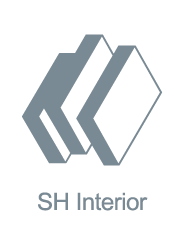
<style>
.page{position:relative;width:188px;height:250px;background:#ffffff}
.page>*{position:absolute;margin:0}
.t1{font:24px "ArialUnicodeMS";letter-spacing:-0.02em;color:#7a8a94}
</style>
<div class="page">
<p class="t1" style="left:38px;top:192px;width:110px;height:19px">SH Interior</p>
</div>
